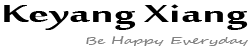
<style>
.page{position:relative;width:250px;height:50px;background:#ffffff}
.page>*{position:absolute;margin:0}
.t1{font:37.6px "MoolBoran";color:#000000;scale:1.71 1}
.t2{font:10px "SegoeScript";color:#828282;scale:1.57 1}
</style>
<div class="page">
<p class="t1" style="left:4px;top:4px;width:244px;height:26px">Keyang Xiang</p>
<p class="t2" style="left:86px;top:36px;width:162px;height:10px">Be Happy Everyday</p>
</div>
